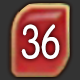
<style>
.page{position:relative;width:80px;height:80px;background:#333333}
.page>*{position:absolute;margin:0}
.t1{font:48px "FZY3JW--GB1-0";letter-spacing:-0.05em;color:#ffffff;scale:0.84 1}
</style>
<div class="page">
<p class="t1" style="left:21px;top:24px;width:39px;height:35px">36</p>
</div>
